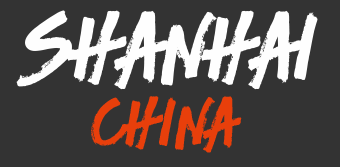
<style>
.page{position:relative;width:340px;height:167px;background:#333333}
.page>*{position:absolute;margin:0}
.t1{font:100px "RiverAdventurePersonalUse-Brush";letter-spacing:-0.02em;color:#fefefe}
.t2{font:72px "RiverAdventurePersonalUse-Brush";letter-spacing:-0.02em;color:#e83f0b}
</style>
<div class="page">
<p class="t1" style="left:16px;top:10px;width:302px;height:80px">shanhai</p>
<p class="t2" style="left:91px;top:96px;width:151px;height:57px">china</p>
</div>
